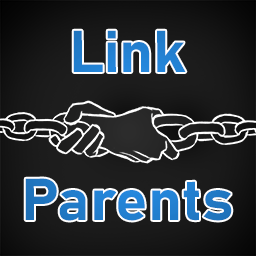
<style>
.page{position:relative;width:256px;height:256px}
.page>*{position:absolute;margin:0}
.t1{font:58.2px/148.3px "Bahnschrift-Bold";color:#227ecd;scale:1.05 1}
</style>
<div class="page">
<p class="t1" style="left:25px;top:30px;width:207px;height:191px;text-align:center">Link<br>Parents</p>
</div>
